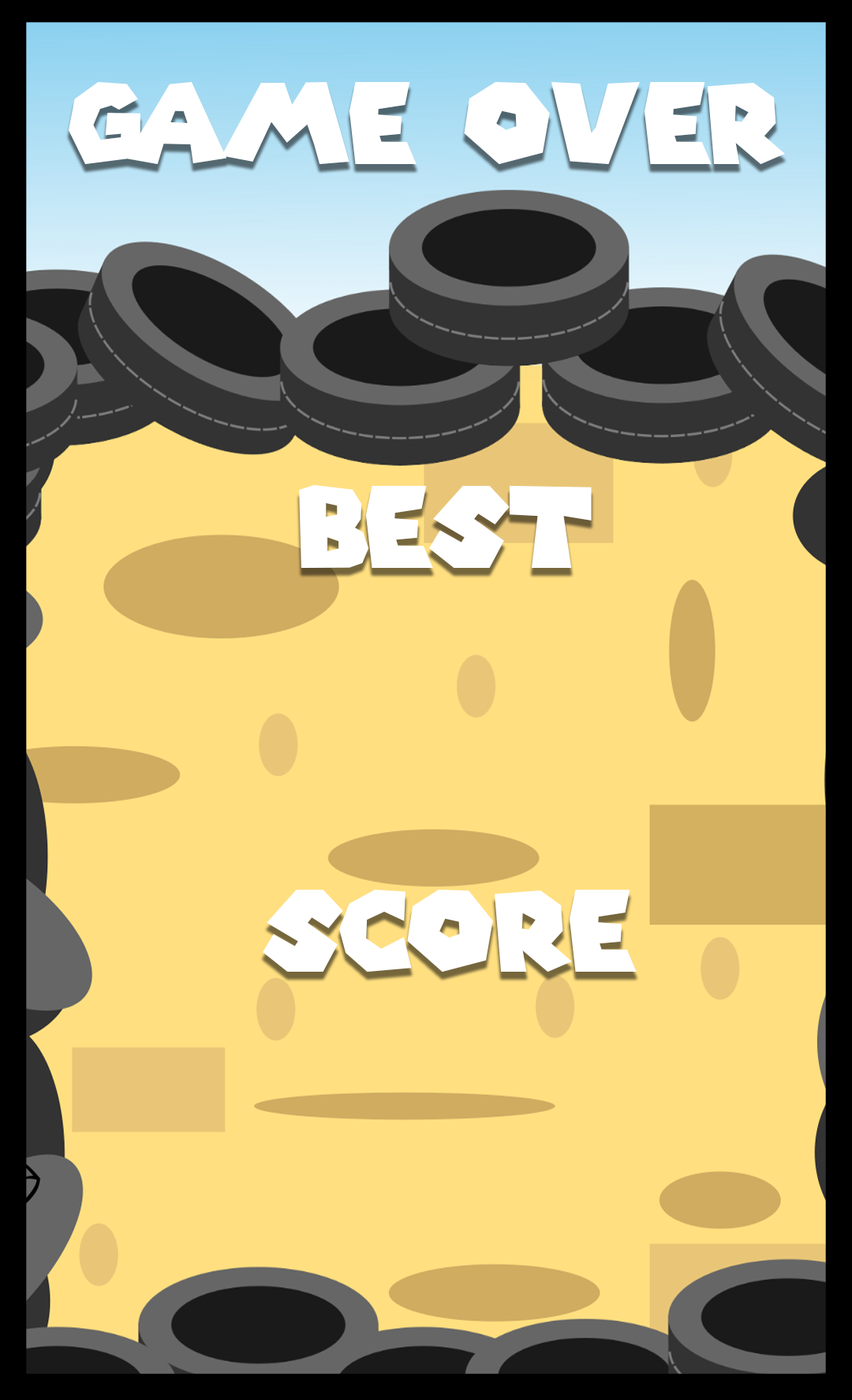
<style>
.page{position:relative;width:852px;height:1400px;background:#ffdf80}
.page>*{position:absolute;margin:0}
.t1{font:110.4px "SuperMarioGalaxy";color:#ffffff}
</style>
<div class="page">
<p class="t1" style="left:69px;top:82px;width:716px;height:82px">game over</p>
<p class="t1" style="left:299px;top:485px;width:293px;height:83px">best</p>
<p class="t1" style="left:263px;top:890px;width:373px;height:82px">score</p>
</div>
